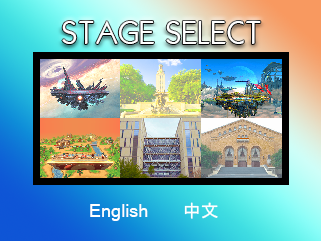
<style>
.page{position:relative;width:321px;height:241px}
.page>*{position:absolute;margin:0}
.t1{font:30px "KabelMedium";color:#ffffff}
.t2{font:18px "MicrosoftSansSerif";color:#ffffff}
.t3{font:18px "MS-Gothic";color:#ffffff}
</style>
<div class="page">
<p class="t1" style="left:62px;top:21px;width:199px;height:23px">STAGE SELECT</p>
<p class="t2" style="left:90px;top:204px;width:58px;height:17px">English</p>
<p class="t3" style="left:184px;top:202px;width:34px;height:17px">中文</p>
</div>
